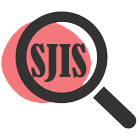
<style>
.page{position:relative;width:140px;height:140px;background:#ffffff}
.page>*{position:absolute;margin:0}
.t1{font:41.7px "BernardMT-Condensed";letter-spacing:0.02em;color:#333333}
</style>
<div class="page">
<p class="t1" style="left:30px;top:43px;width:57px;height:39px">SJIS</p>
</div>
